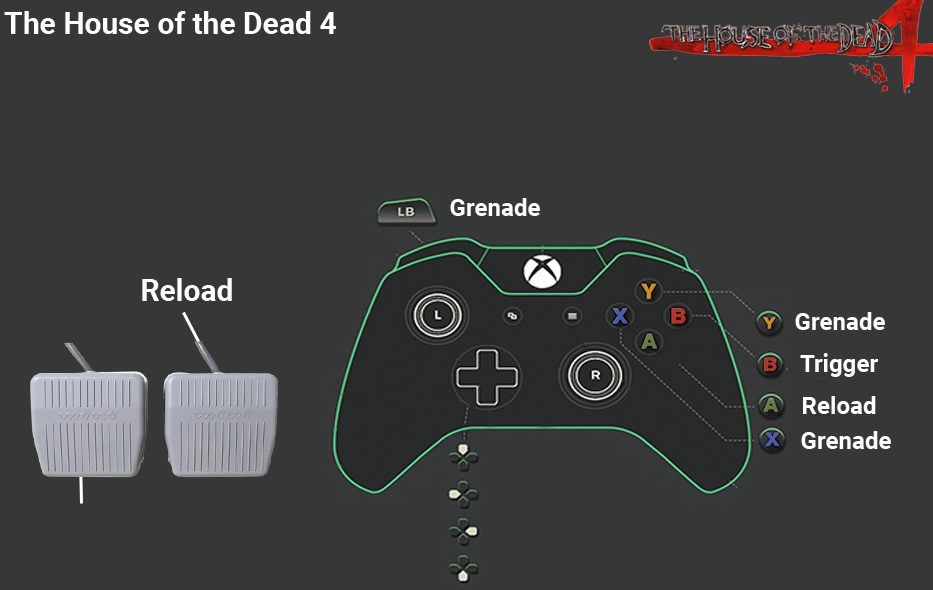
<style>
.page{position:relative;width:933px;height:590px;background:#363838}
.page>*{position:absolute;margin:0}
.t1{font:30px "Roboto-Bold";color:#ffffff}
.t2{font:24px "Roboto-Bold";color:#ffffff}
</style>
<div class="page">
<p class="t1" style="left:4px;top:11px;width:332px;height:23px">The House of the Dead 4</p>
<p class="t2" style="left:450px;top:198px;width:90px;height:18px">Grenade</p>
<p class="t1" style="left:142px;top:278px;width:90px;height:23px">Reload</p>
<p class="t2" style="left:795px;top:312px;width:90px;height:18px">Grenade</p>
<p class="t2" style="left:800px;top:353px;width:78px;height:24px">Trigger</p>
<p class="t2" style="left:803px;top:396px;width:73px;height:18px">Reload</p>
<p class="t2" style="left:801px;top:431px;width:90px;height:18px">Grenade</p>
</div>
